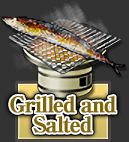
<style>
.page{position:relative;width:129px;height:142px;background:#333333}
.page>*{position:absolute;margin:0}
.t1{font:22px/20px "RyuminPro-ExBold";letter-spacing:-0.08em;color:#816500;font-weight:bold}
</style>
<div class="page">
<p class="t1" style="left:10px;top:96px;width:106px;height:37px;text-align:center">Grilled and<br>Salted</p>
</div>
